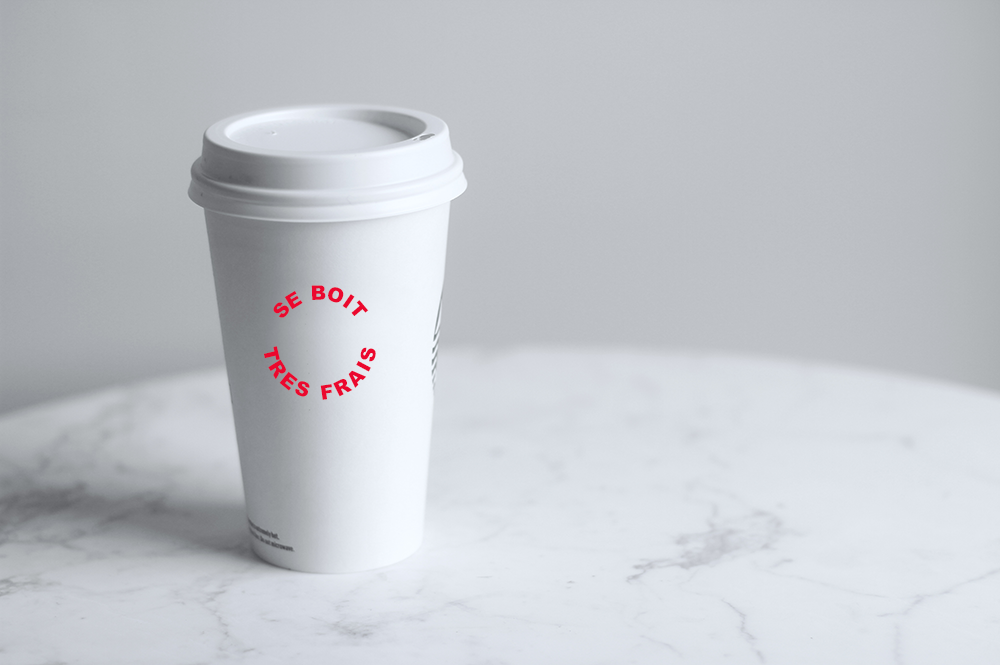
<style>
.page{position:relative;width:1000px;height:665px}
.page>*{position:absolute;margin:0}
.t1{font:20px "Arial-Black";letter-spacing:0.2em;color:#eb082e}
</style>
<div class="page">
<p class="t1" style="left:273px;top:285px;width:96px;height:33px">SE BOIT</p>
<p class="t1" style="left:264px;top:346px;width:112px;height:54px;text-align:center">TRES FRAIS</p>
</div>
